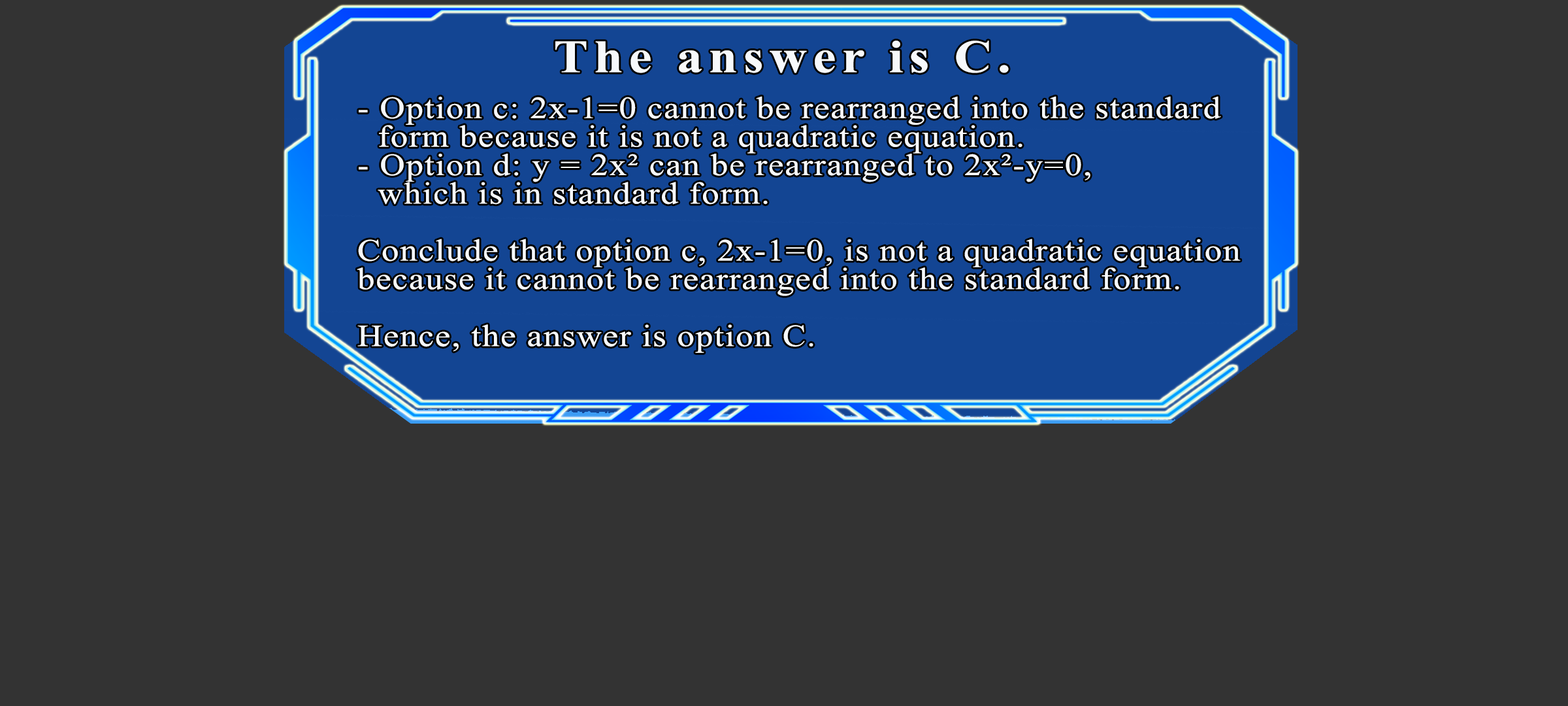
<style>
.page{position:relative;width:1568px;height:706px;background:#333333}
.page>*{position:absolute;margin:0}
.t1{font:46.3px "TimesNewRomanPS-BoldMT";letter-spacing:0.115em;color:#f7f9fb;scale:1.12 1}
.t2{font:30.9px/28.5px "TimesNewRomanPSMT";letter-spacing:0.035em;color:#f7f9fb;scale:1.12 1}
</style>
<div class="page">
<p class="t1" style="left:555px;top:41px;width:454px;height:32px">The answer is C.</p>
<p class="t2" style="left:357px;top:96px;width:884px;height:257px">- Option c: 2x-1=0 cannot be rearranged into the standard<br> form because it is not a quadratic equation.<br>- Option d: y = 2x² can be rearranged to 2x²-y=0,<br> which is in standard form.<br><br>Conclude that option c, 2x-1=0, is not a quadratic equation<br>because it cannot be rearranged into the standard form.<br><br>Hence, the answer is option C.</p>
</div>
